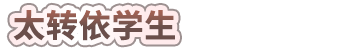
<style>
.page{position:relative;width:360px;height:50px;background:#ffffff}
.page>*{position:absolute;margin:0}
.t1{font:32px "SourceHanSansSC-Bold";color:#73534d;font-weight:bold}
</style>
<div class="page">
<p class="t1" style="left:13px;top:9px;width:162px;height:32px">太转依学生</p>
</div>
